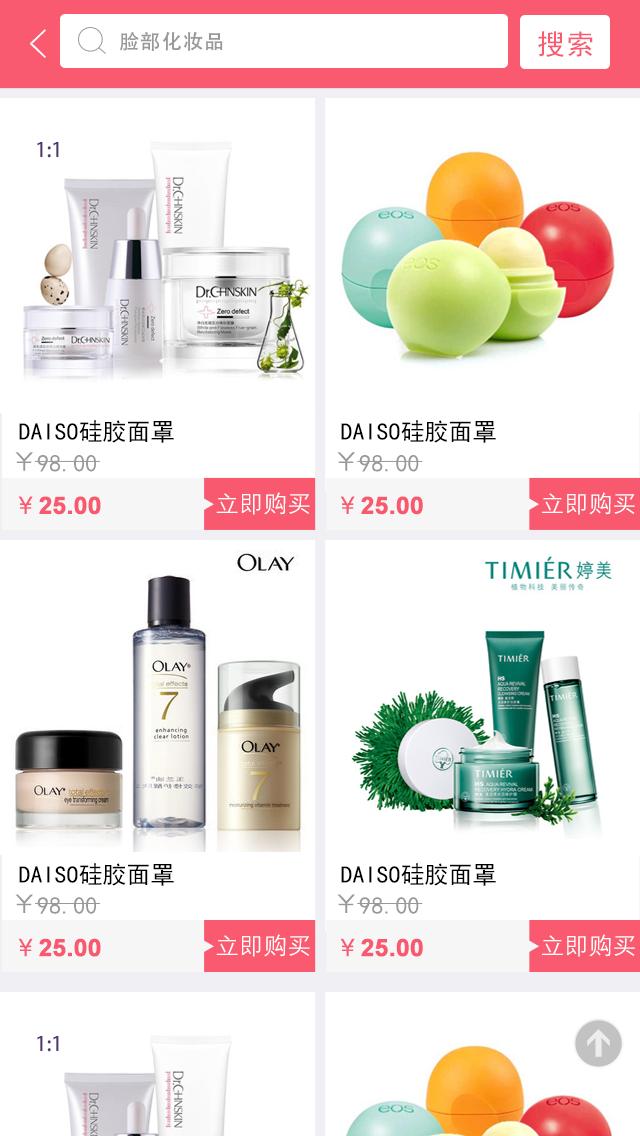
<style>
.page{position:relative;width:640px;height:1136px;background:#ffffff}
.page>*{position:absolute;margin:0}
.t1{font:40px "FZYXJW--GB1-0";color:#ffffff}
.t2{font:20px "AdobeHeitiStd-Regular";letter-spacing:0.06em;color:#999999}
.t3{font:28px "SimHei";letter-spacing:0.06em;color:#f95a70}
.t4{font:20px "AdobeHeitiStd-Regular";color:#50346d}
.t5{font:24px "SimHei";color:#000000}
.t6{font:28px "SimHei";color:#999999}
.t7{font:24px "SimHei";color:#999999}
.t8{font:24px "FZZDXJW--GB1-0";color:#f95a70;font-weight:bold}
.t9{font:24px "Arial-BoldMT";color:#f8596f;font-weight:bold}
.t10{font:24px "FZZDXJW--GB1-0";color:#ffffff}
.t11{font:24px "FZZDXJW--GB1-0";color:#f85a71;font-weight:bold}
</style>
<div class="page">
<p class="t1" style="left:29px;top:29px;width:17px;height:29px">&lt;</p>
<p class="t2" style="left:120px;top:32px;width:103px;height:19px">脸部化妆品</p>
<p class="t3" style="left:538px;top:31px;width:55px;height:26px">搜索</p>
<p class="t4" style="left:37px;top:142px;width:22px;height:16px">1:1</p>
<p class="t5" style="left:19px;top:420px;width:155px;height:23px">DAISO硅胶面罩</p>
<p class="t5" style="left:341px;top:420px;width:155px;height:23px">DAISO硅胶面罩</p>
<p class="t6" style="left:15px;top:452px;width:18px;height:19px">￥</p>
<p class="t7" style="left:37px;top:455px;width:59px;height:17px">98.00</p>
<p class="t6" style="left:337px;top:452px;width:18px;height:19px">￥</p>
<p class="t7" style="left:359px;top:455px;width:60px;height:17px">98.00</p>
<p class="t8" style="left:18px;top:496px;width:15px;height:18px">￥</p>
<p class="t9" style="left:39px;top:496px;width:62px;height:19px">25.00</p>
<p class="t10" style="left:216px;top:492px;width:94px;height:23px">立即购买</p>
<p class="t8" style="left:340px;top:496px;width:15px;height:18px">￥</p>
<p class="t9" style="left:361px;top:496px;width:62px;height:19px">25.00</p>
<p class="t10" style="left:542px;top:492px;width:93px;height:23px">立即购买</p>
<p class="t5" style="left:19px;top:863px;width:155px;height:23px">DAISO硅胶面罩</p>
<p class="t5" style="left:341px;top:863px;width:155px;height:23px">DAISO硅胶面罩</p>
<p class="t6" style="left:15px;top:894px;width:18px;height:19px">￥</p>
<p class="t6" style="left:337px;top:894px;width:18px;height:19px">￥</p>
<p class="t7" style="left:37px;top:897px;width:59px;height:17px">98.00</p>
<p class="t7" style="left:359px;top:897px;width:60px;height:17px">98.00</p>
<p class="t11" style="left:18px;top:938px;width:15px;height:19px">￥</p>
<p class="t9" style="left:39px;top:938px;width:62px;height:19px">25.00</p>
<p class="t10" style="left:216px;top:934px;width:94px;height:23px">立即购买</p>
<p class="t11" style="left:340px;top:938px;width:15px;height:19px">￥</p>
<p class="t9" style="left:361px;top:938px;width:62px;height:19px">25.00</p>
<p class="t10" style="left:542px;top:934px;width:93px;height:23px">立即购买</p>
<p class="t4" style="left:37px;top:1036px;width:22px;height:16px">1:1</p>
</div>
